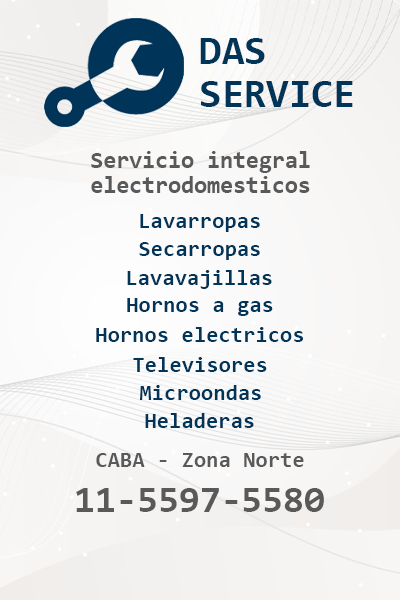
<style>
.page{position:relative;width:400px;height:600px}
.page>*{position:absolute;margin:0}
.t1{font:40.5px/42.7px "Consolas-Bold";color:#003459}
.t2{font:23.6px/24.8px "Consolas-Bold";color:#595959}
.t3{font:22.4px "Consolas-Bold";color:#003459}
.t4{font:22.4px "Consolas-Bold";color:#595959}
.t5{font:38px "Consolas-Bold";color:#595959}
</style>
<div class="page">
<p class="t1" style="left:200px;top:38px;width:153px;height:69px">DAS<br>SERVICE</p>
<p class="t2" style="left:91px;top:151px;width:219px;height:42px;text-align:center">Servicio integral<br>electrodomesticos</p>
<p class="t3" style="left:140px;top:214px;width:120px;height:18px">Lavarropas</p>
<p class="t3" style="left:139px;top:242px;width:121px;height:18px">Secarropas</p>
<p class="t3" style="left:127px;top:270px;width:145px;height:19px">Lavavajillas</p>
<p class="t3" style="left:127px;top:298px;width:146px;height:18px">Hornos a gas</p>
<p class="t3" style="left:96px;top:327px;width:207px;height:15px">Hornos electricos</p>
<p class="t3" style="left:133px;top:357px;width:134px;height:15px">Televisores</p>
<p class="t3" style="left:140px;top:385px;width:121px;height:15px">Microondas</p>
<p class="t3" style="left:145px;top:413px;width:109px;height:15px">Heladeras</p>
<p class="t4" style="left:96px;top:453px;width:208px;height:14px">CABA - Zona Norte</p>
<p class="t5" style="left:76px;top:488px;width:248px;height:24px">11-5597-5580</p>
</div>
